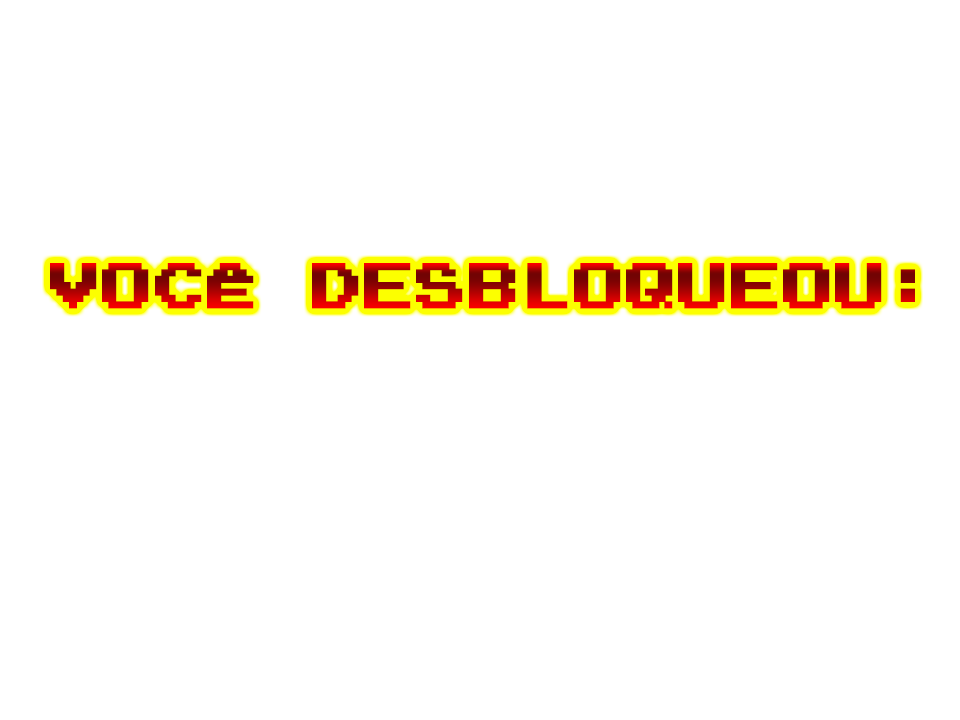
<style>
.page{position:relative;width:960px;height:720px;background:#ffffff}
.page>*{position:absolute;margin:0}
.t1{font:51px "PressStart2P";font-weight:bold}
</style>
<div class="page">
<p class="t1" style="left:50px;top:263px;width:865px;height:46px">VOCÊ DESBLOQUEOU:</p>
</div>
